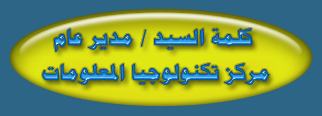
<style>
.page{position:relative;width:322px;height:116px;background:#2d6586}
.page>*{position:absolute;margin:0}
.t1{font:22px/35px "PTBoldHeading";font-weight:bold}
</style>
<div class="page">
<p class="t1" style="left:42px;top:28px;width:228px;height:57px;text-align:center">كلمة السيد / مدير عام <br>مركز تكنولوجيا المعلومات</p>
</div>
